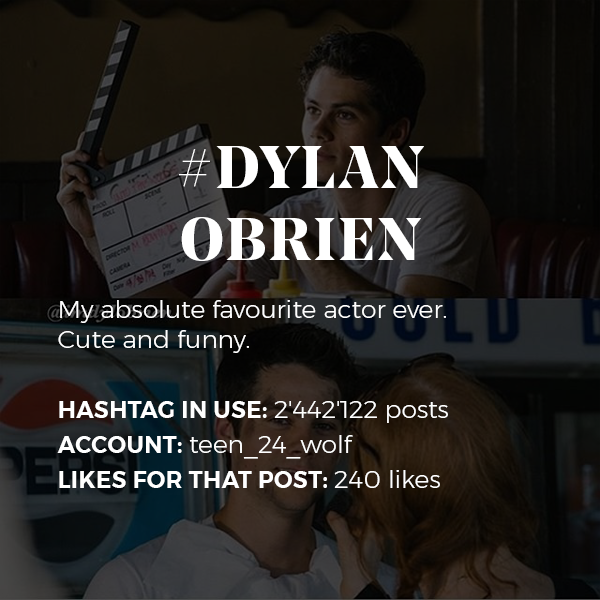
<style>
.page{position:relative;width:600px;height:600px}
.page>*{position:absolute;margin:0}
.t1{font:25px "Montserrat-Light";color:#ffffff}
.t2{font:60px "NoeDisplay-Bold";letter-spacing:0.05em;color:#ffffff;text-transform:uppercase}
.t3{font:23px/35px "Montserrat-SemiBold";letter-spacing:0.02em;color:#ffffff;text-transform:uppercase}
.t4{font:25px/35px "Montserrat-Light";color:#ffffff}
</style>
<div class="page">
<p class="t1" style="left:57px;top:146px;width:391px;height:342px;text-align:center"><span class="t2">#dylan<br>obrien<br><br></span>My absolute favourite actor ever. <br>Cute and funny. <br><span class="t3"><br>Hashtag in use: </span><span class="t4">2'442'122 posts<br></span><span class="t3">Account: </span><span class="t4">teen_24_wolf<br></span><span class="t3">likes for that post: </span><span class="t4">240 likes</span></p>
</div>
